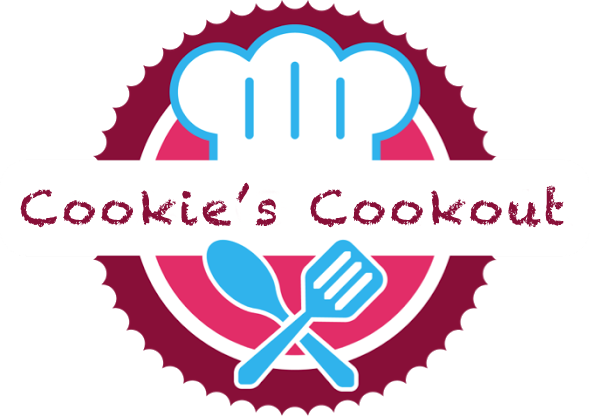
<style>
.page{position:relative;width:590px;height:416px;background:#ffffff}
.page>*{position:absolute;margin:0}
.t1{font:48px "Chalkduster";letter-spacing:0.075em;color:#880f38}
</style>
<div class="page">
<p class="t1" style="left:20px;top:182px;width:544px;height:46px">Cookie’s Cookout</p>
</div>
